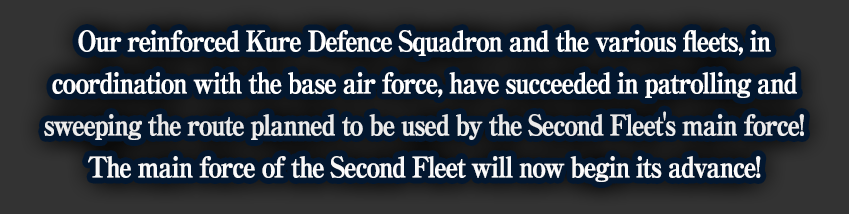
<style>
.page{position:relative;width:849px;height:214px;background:#03172f}
.page>*{position:absolute;margin:0}
.t1{font:28px/42px "RyuminPro-ExBold";letter-spacing:-0.08em;color:#ffffff;font-weight:bold;scale:0.9 1}
</style>
<div class="page">
<p class="t1" style="left:44px;top:30px;width:760px;height:152px;text-align:center">Our reinforced Kure Defence Squadron and the various fleets, in<br>coordination with the base air force, have succeeded in patrolling and<br>sweeping the route planned to be used by the Second Fleet's main force!<br>The main force of the Second Fleet will now begin its advance!</p>
</div>
